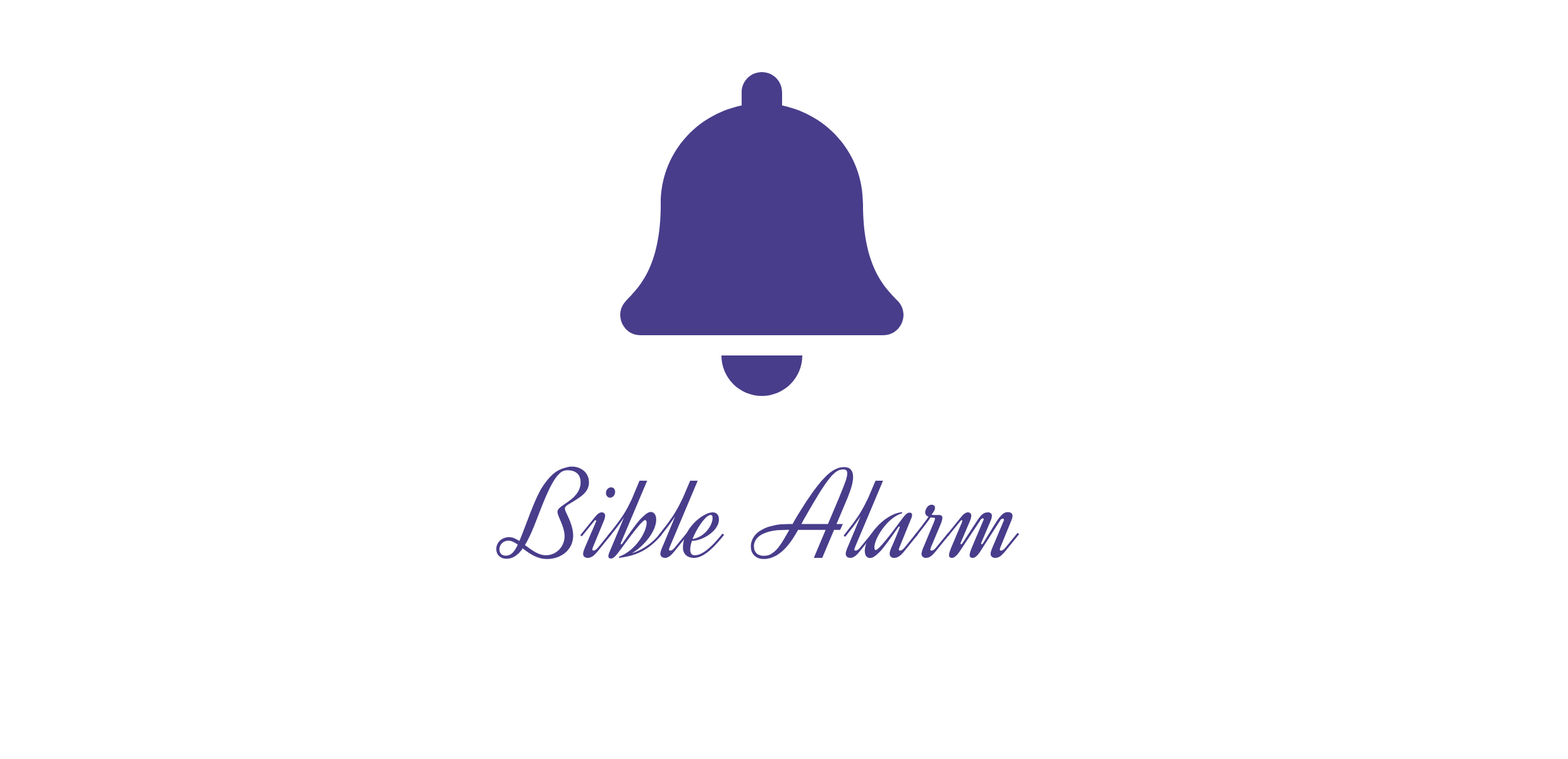
<style>
.page{position:relative;width:1568px;height:759px;background:#ffffff}
.page>*{position:absolute;margin:0}
.t1{font:129.6px "Dynalight-Regular";color:#483d8b}
</style>
<div class="page">
<p class="t1" style="left:496px;top:466px;width:523px;height:93px">Bible Alarm</p>
</div>
